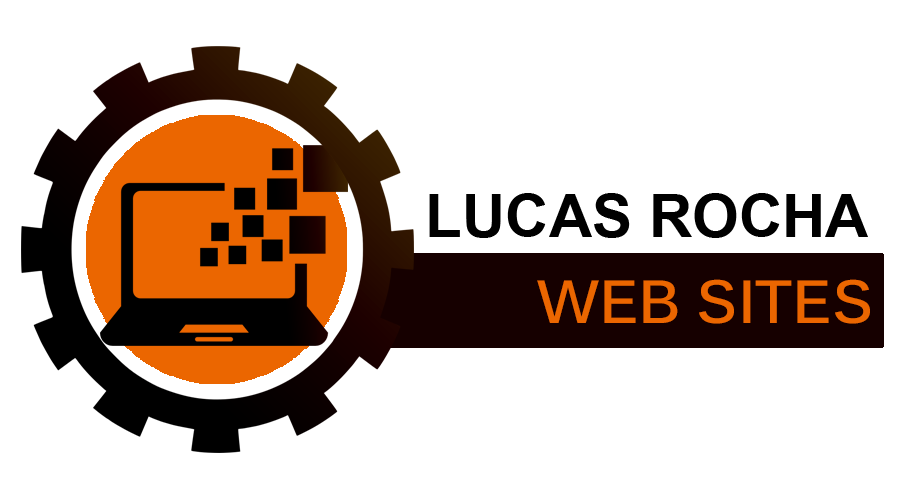
<style>
.page{position:relative;width:900px;height:500px;background:#ffffff}
.page>*{position:absolute;margin:0}
.t1{font:60px "Arial-BoldMT";color:#000000}
.t2{font:60px "Kalinga-Bold";color:#eb6600}
</style>
<div class="page">
<p class="t1" style="left:429px;top:193px;width:439px;height:45px">LUCAS ROCHA</p>
<p class="t2" style="left:537px;top:279px;width:333px;height:45px">WEB SITES</p>
</div>
